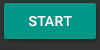
<style>
.page{position:relative;width:100px;height:50px;background:#009688}
.page>*{position:absolute;margin:0}
.t1{font:14px "Roboto-Medium";letter-spacing:0.01em;color:#ffffff}
</style>
<div class="page">
<p class="t1" style="left:29px;top:16px;width:43px;height:11px">START</p>
</div>
